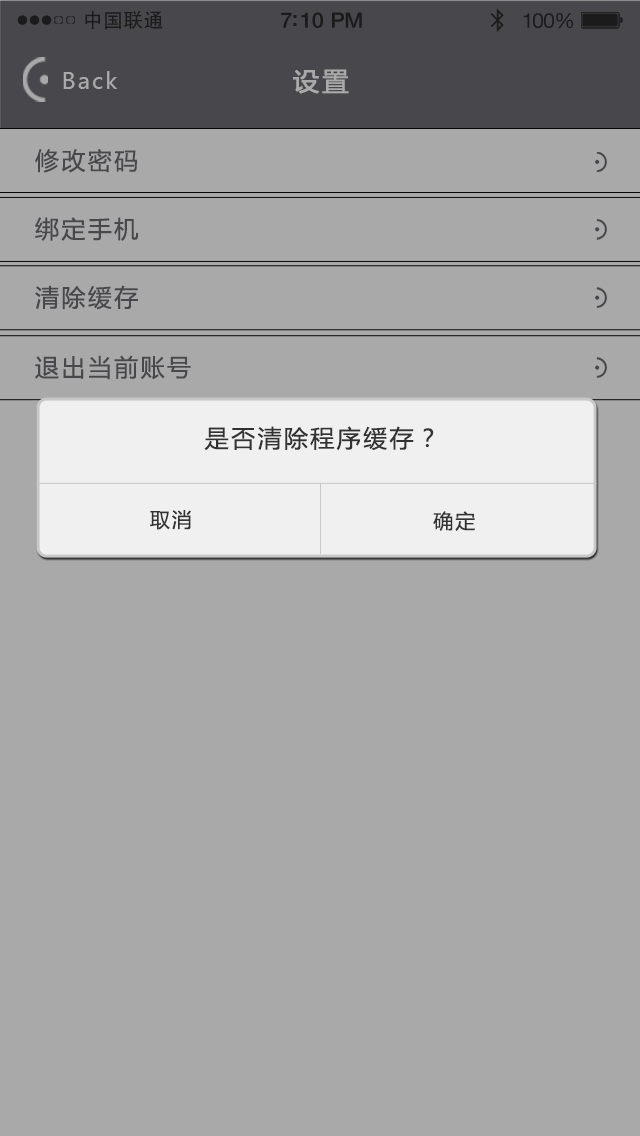
<style>
.page{position:relative;width:640px;height:1136px;background:#a9a9a9}
.page>*{position:absolute;margin:0}
.t1{font:19.7px "AdobeHeitiStd-Regular";letter-spacing:0.02em;color:#1b1b1b}
.t2{font:21.4px "HelveticaNeue-Medium";letter-spacing:-0.02em;color:#1b1b1b}
.t3{font:20.6px "HelveticaNeue";letter-spacing:-0.02em;color:#1b1b1b}
.t4{font:22px "MicrosoftYaHei";letter-spacing:0.1em;color:#a9a9a9}
.t5{font:26px "MicrosoftYaHei";letter-spacing:0.1em;color:#a9a9a9;font-weight:bold}
.t6{font:24px "MicrosoftYaHei";letter-spacing:0.1em;color:#48484c}
.t7{font:24px "MicrosoftYaHei";letter-spacing:0.1em;color:#323232}
.t8{font:20px "MicrosoftYaHei";letter-spacing:0.1em;color:#323232}
</style>
<div class="page">
<p class="t1" style="left:85px;top:10px;width:78px;height:20px">中国联通</p>
<p class="t2" style="left:281px;top:12px;width:81px;height:16px">7:10 PM</p>
<p class="t3" style="left:523px;top:13px;width:50px;height:16px">100%</p>
<p class="t4" style="left:63px;top:71px;width:55px;height:18px">Back</p>
<p class="t5" style="left:293px;top:69px;width:56px;height:25px">设置</p>
<p class="t6" style="left:35px;top:149px;width:102px;height:24px">修改密码</p>
<p class="t6" style="left:35px;top:217px;width:104px;height:24px">绑定手机</p>
<p class="t6" style="left:35px;top:285px;width:103px;height:25px">清除缓存</p>
<p class="t6" style="left:35px;top:355px;width:156px;height:25px">退出当前账号</p>
<p class="t7" style="left:204px;top:426px;width:230px;height:25px">是否清除程序缓存？</p>
<p class="t8" style="left:150px;top:510px;width:41px;height:20px">取消</p>
<p class="t8" style="left:433px;top:511px;width:42px;height:20px">确定</p>
</div>
